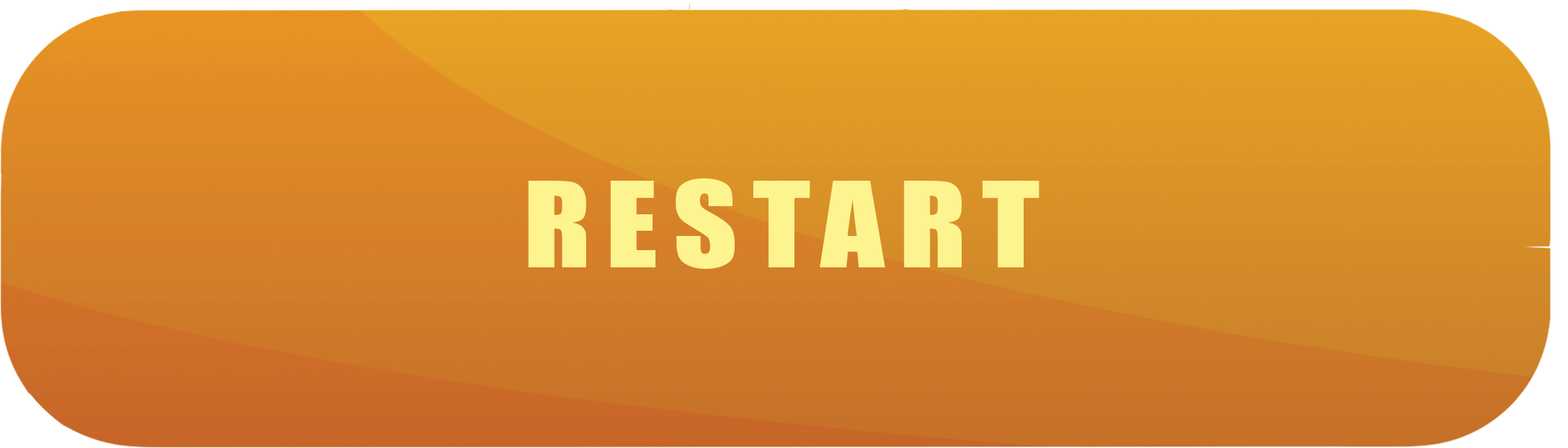
<style>
.page{position:relative;width:1568px;height:448px}
.page>*{position:absolute;margin:0}
.t1{font:109.9px "Impact";letter-spacing:0.12em;color:#fdf38f;scale:1.14 1}
</style>
<div class="page">
<p class="t1" style="left:528px;top:178px;width:511px;height:91px">RESTART</p>
</div>
